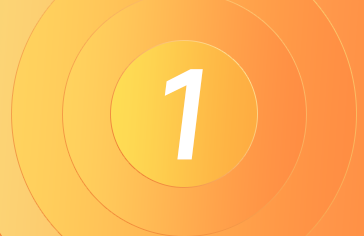
<style>
.page{position:relative;width:364px;height:236px}
.page>*{position:absolute;margin:0}
.t1{font:120px "DingTalk-JinBuTi";letter-spacing:0.1em;color:#ffffff}
</style>
<div class="page">
<p class="t1" style="left:164px;top:69px;width:39px;height:91px">1</p>
</div>
